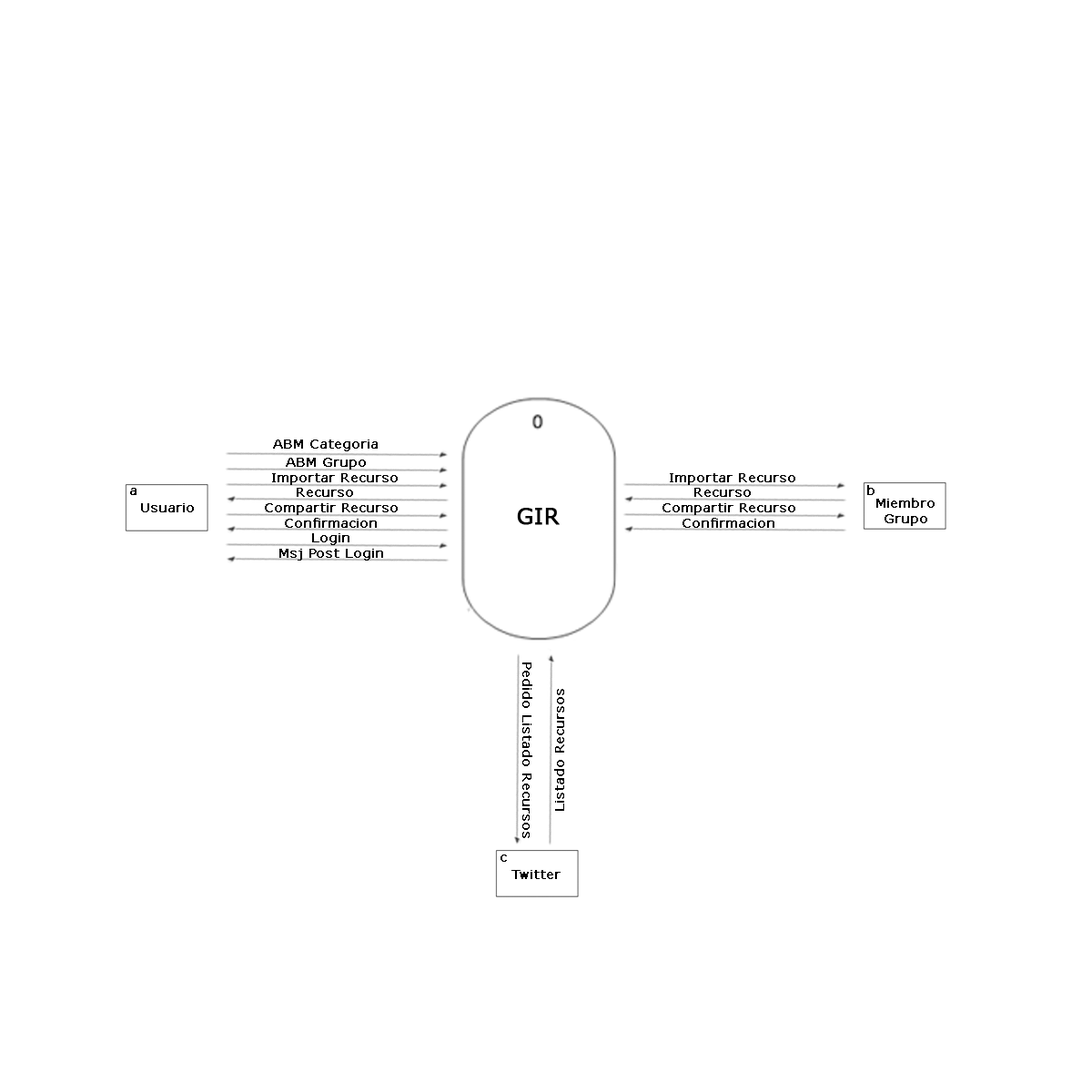
<style>
.page{position:relative;width:1092px;height:1092px;background:#ffffff}
.page>*{position:absolute;margin:0}
.t1{font:12.7px "MSReferenceSansSerif";color:#000000;font-weight:bold}
.t2{font:21.8px "MSReferenceSansSerif";color:#000000;font-weight:bold}
</style>
<div class="page">
<p class="t1" style="left:273px;top:440px;width:105px;height:11px">ABM Categoria</p>
<p class="t1" style="left:286px;top:458px;width:80px;height:12px">ABM Grupo</p>
<p class="t1" style="left:272px;top:473px;width:126px;height:12px">Importar Recurso</p>
<p class="t1" style="left:670px;top:473px;width:125px;height:12px">Importar Recurso</p>
<p class="t1" style="left:867px;top:485px;width:7px;height:10px">b</p>
<p class="t1" style="left:130px;top:488px;width:6px;height:7px">a</p>
<p class="t1" style="left:297px;top:488px;width:56px;height:9px">Recurso</p>
<p class="t1" style="left:694px;top:488px;width:57px;height:9px">Recurso</p>
<p class="t1" style="left:876px;top:498px;width:59px;height:28px;text-align:center">Miembro<br>Grupo</p>
<p class="t1" style="left:141px;top:503px;width:53px;height:9px">Usuario</p>
<p class="t1" style="left:265px;top:503px;width:133px;height:12px">Compartir Recurso</p>
<p class="t2" style="left:517px;top:508px;width:43px;height:17px">GIR</p>
<p class="t1" style="left:662px;top:503px;width:133px;height:12px">Compartir Recurso</p>
<p class="t1" style="left:285px;top:518px;width:92px;height:10px">Confirmacion</p>
<p class="t1" style="left:682px;top:518px;width:92px;height:10px">Confirmacion</p>
<p class="t1" style="left:312px;top:533px;width:37px;height:12px">Login</p>
<p class="t1" style="left:279px;top:549px;width:104px;height:12px">Msj Post Login</p>
<p class="t1" style="left:522px;top:662px;width:10px;height:176px;rotate:90deg">Pedido Listado Recursos</p>
<p class="t1" style="left:554px;top:689px;width:10px;height:122px;rotate:-90deg">Listado Recursos</p>
<p class="t1" style="left:500px;top:854px;width:7px;height:8px">c</p>
<p class="t1" style="left:511px;top:870px;width:50px;height:9px">Twitter</p>
</div>
